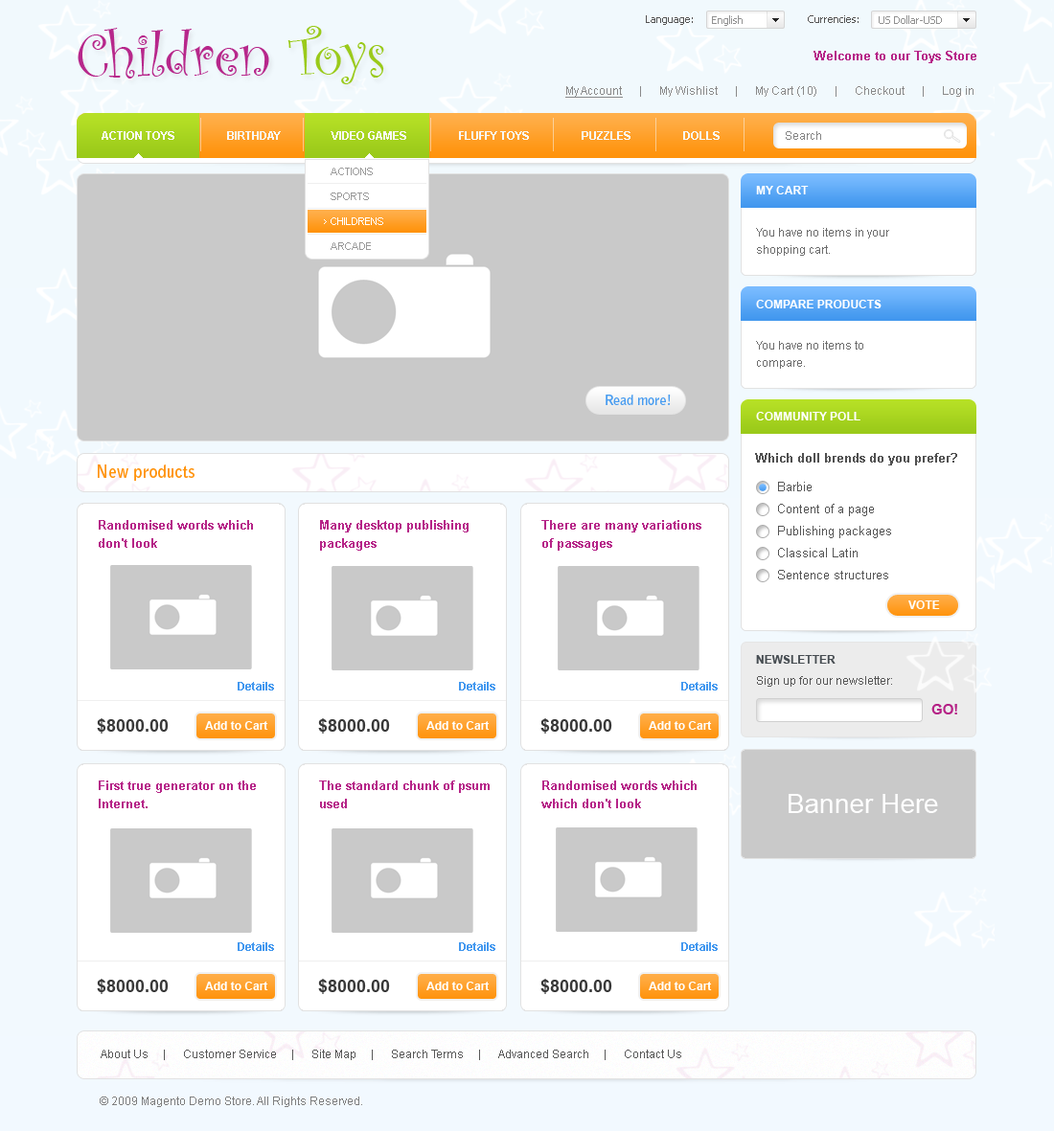
<style>
.page{position:relative;width:1054px;height:1131px;background:#ffffff}
.page>*{position:absolute;margin:0}
.t1{font:10.5px "Tahoma";color:#545454}
.t2{font:10.5px "Tahoma";color:#929292}
.t3{font:61.3px "CurlzMT";color:#b7278b}
.t4{font:61.3px "CurlzMT";color:#9aca1a}
.t5{font:12.5px "Arial-BoldMT";color:#b62488}
.t6{font:11.5px "ArialMT";color:#8a8a8a}
.t7{font:11.5px "ArialMT";color:#8a8a8a;text-decoration:underline}
.t8{font:11.5px "Arial-BoldMT";color:#f8f8f8;text-transform:uppercase}
.t9{font:11.5px "ArialMT";color:#848484}
.t10{font:10.5px/24.9px "ArialMT";color:#999999;text-transform:uppercase}
.t11{font:10.5px/24.9px "ArialMT";color:#ffffff;text-transform:uppercase}
.t12{font:11.5px "Arial-BoldMT";color:#ffffff;text-transform:uppercase}
.t13{font:11.5px/17.2px "ArialMT";color:#6d6d6d}
.t14{font:13.4px "BellGothicStd-Bold";color:#489cf0}
.t15{font:12.5px "Arial-BoldMT";color:#505050}
.t16{font:17.2px "BellGothicStd-Bold";color:#ff930c}
.t17{font:12.5px "ArialMT";color:#545454}
.t18{font:12.5px/18.2px "Arial-BoldMT";color:#b62488}
.t19{font:11.5px "Arial-BoldMT";color:#ffffff}
.t20{font:11.5px "Arial-BoldMT";color:#474d52;text-transform:uppercase}
.t21{font:11.5px "ArialMT";color:#575757}
.t22{font:11.5px "Arial-BoldMT";color:#4398ef}
.t23{font:14.4px "Arial-BoldMT";color:#b52186;text-transform:uppercase}
.t24{font:17.2px "Arial-BoldMT";color:#383838}
.t25{font:26.8px "ArialMT";color:#ffffff}
.t26{font:11.5px "ArialMT";color:#585858}
.t27{font:11.5px "ArialMT";color:#7f7f7f}
</style>
<div class="page">
<p class="t1" style="left:646px;top:15px;width:47px;height:10px">Language:</p>
<p class="t2" style="left:712px;top:15px;width:31px;height:11px">English</p>
<p class="t1" style="left:808px;top:15px;width:50px;height:8px">Currencies:</p>
<p class="t2" style="left:879px;top:15px;width:63px;height:9px">US Dollar-USD</p>
<p class="t3" style="left:78px;top:26px;width:306px;height:58px">Children <span class="t4">Toys</span></p>
<p class="t5" style="left:813px;top:51px;width:163px;height:12px">Welcome to our Toys Store</p>
<p class="t6" style="left:565px;top:86px;width:408px;height:12px"><span class="t7">My Account</span>      |      My Wishlist      |      My Cart (10)      |      Checkout      |      Log in</p>
<p class="t8" style="left:102px;top:131px;width:618px;height:9px">Action toys                  Birthday                  Video games                  Fluffy toys                  Puzzles                  Dolls</p>
<p class="t9" style="left:786px;top:131px;width:35px;height:9px">Search</p>
<p class="t10" style="left:331px;top:168px;width:52px;height:82px">Actions<br>Sports<br><span class="t11">Childrens<br></span>Arcade</p>
<p class="t12" style="left:756px;top:186px;width:53px;height:8px">My cart</p>
<p class="t13" style="left:756px;top:228px;width:133px;height:28px">You have no items in your<br>shopping cart.</p>
<p class="t12" style="left:756px;top:300px;width:125px;height:8px">Compare products</p>
<p class="t13" style="left:756px;top:341px;width:107px;height:28px">You have no items to <br>compare.</p>
<p class="t14" style="left:605px;top:395px;width:66px;height:10px">Read more!</p>
<p class="t12" style="left:756px;top:412px;width:104px;height:9px">Community poll</p>
<p class="t15" style="left:755px;top:453px;width:202px;height:13px">Which doll brends do you prefer?</p>
<p class="t16" style="left:98px;top:465px;width:96px;height:16px">New products</p>
<p class="t17" style="left:778px;top:482px;width:33px;height:9px">Barbie</p>
<p class="t17" style="left:778px;top:504px;width:96px;height:12px">Content of a page</p>
<p class="t18" style="left:99px;top:520px;width:154px;height:28px">Randomised words which don't look</p>
<p class="t18" style="left:320px;top:520px;width:148px;height:31px">Many desktop publishing packages</p>
<p class="t18" style="left:541px;top:520px;width:160px;height:31px">There are many variations of passages</p>
<p class="t17" style="left:778px;top:526px;width:113px;height:12px">Publishing packages</p>
<p class="t17" style="left:778px;top:548px;width:79px;height:10px">Classical Latin</p>
<p class="t17" style="left:778px;top:570px;width:110px;height:10px">Sentence structures</p>
<p class="t19" style="left:908px;top:601px;width:32px;height:8px">VOTE</p>
<p class="t20" style="left:756px;top:655px;width:79px;height:9px">Newsletter</p>
<p class="t21" style="left:757px;top:676px;width:135px;height:11px">Sign up for our newsletter:</p>
<p class="t22" style="left:238px;top:682px;width:36px;height:9px">Details</p>
<p class="t22" style="left:459px;top:682px;width:36px;height:9px">Details</p>
<p class="t22" style="left:681px;top:682px;width:37px;height:9px">Details</p>
<p class="t23" style="left:931px;top:704px;width:26px;height:11px">Go!</p>
<p class="t24" style="left:97px;top:719px;width:72px;height:15px">$8000.00</p>
<p class="t19" style="left:205px;top:721px;width:63px;height:9px">Add to Cart</p>
<p class="t24" style="left:318px;top:719px;width:72px;height:15px">$8000.00</p>
<p class="t19" style="left:426px;top:721px;width:64px;height:9px">Add to Cart</p>
<p class="t24" style="left:540px;top:719px;width:72px;height:15px">$8000.00</p>
<p class="t19" style="left:649px;top:721px;width:63px;height:9px">Add to Cart</p>
<p class="t18" style="left:99px;top:781px;width:157px;height:28px">First true generator on the Internet.</p>
<p class="t18" style="left:319px;top:781px;width:171px;height:28px">The standard chunk of psum used</p>
<p class="t18" style="left:541px;top:781px;width:156px;height:28px">Randomised words which which don't look</p>
<p class="t25" style="left:788px;top:794px;width:150px;height:19px">Banner Here</p>
<p class="t22" style="left:238px;top:943px;width:36px;height:8px">Details</p>
<p class="t22" style="left:459px;top:943px;width:36px;height:8px">Details</p>
<p class="t22" style="left:681px;top:943px;width:37px;height:8px">Details</p>
<p class="t24" style="left:97px;top:979px;width:72px;height:15px">$8000.00</p>
<p class="t19" style="left:205px;top:982px;width:63px;height:9px">Add to Cart</p>
<p class="t24" style="left:318px;top:979px;width:72px;height:15px">$8000.00</p>
<p class="t19" style="left:426px;top:982px;width:64px;height:9px">Add to Cart</p>
<p class="t24" style="left:540px;top:979px;width:72px;height:15px">$8000.00</p>
<p class="t19" style="left:649px;top:982px;width:63px;height:9px">Add to Cart</p>
<p class="t26" style="left:101px;top:1050px;width:580px;height:11px">About Us     |      Customer Service     |      Site Map     |      Search Terms     |      Advanced Search     |      Contact Us</p>
<p class="t27" style="left:100px;top:1097px;width:262px;height:11px">© 2009 Magento Demo Store. All Rights Reserved.</p>
</div>
